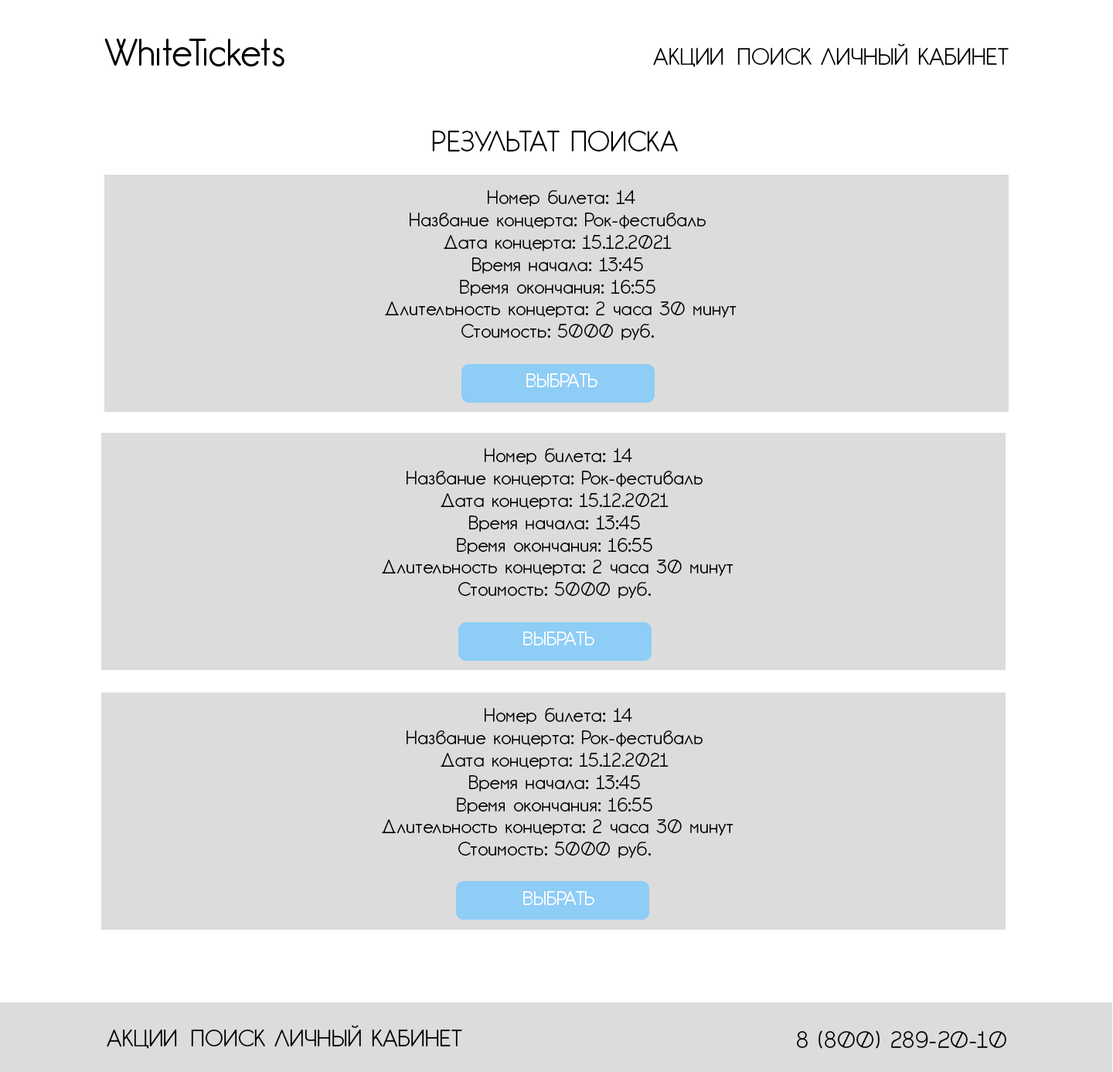
<style>
.page{position:relative;width:1113px;height:1072px;background:#dcdcdc}
.page>*{position:absolute;margin:0}
.t1{font:23.2px "GardensC";color:#000000}
.t2{font:27.8px "GardensC";color:#000000}
.t3{font:18.5px "GardensC";color:#000000}
.t4{font:18.5px "GardensC";color:#ffffff}
</style>
<div class="page">
<p class="t1" style="left:653px;top:43px;width:355px;height:24px">АКЦИИ ПОИСК ЛИЧНЫЙ КАБИНЕТ</p>
<p class="t2" style="left:432px;top:131px;width:246px;height:20px">РЕЗУЛЬТАТ ПОИСКА</p>
<p class="t3" style="left:385px;top:189px;width:351px;height:151px;text-align:center">Номер билета: 14<br>Название концерта: Рок-фестиваль <br>Дата концерта: 15.12.2021 <br>Время начала: 13:45 <br>Время окончания: 16:55 <br>Длительность концерта: 2 часа 30 минут<br>Стоимость: 5000 руб.</p>
<p class="t4" style="left:526px;top:373px;width:71px;height:15px">ВЫБРАТЬ</p>
<p class="t3" style="left:382px;top:447px;width:351px;height:151px;text-align:center">Номер билета: 14<br>Название концерта: Рок-фестиваль <br>Дата концерта: 15.12.2021 <br>Время начала: 13:45 <br>Время окончания: 16:55 <br>Длительность концерта: 2 часа 30 минут<br>Стоимость: 5000 руб.</p>
<p class="t4" style="left:523px;top:631px;width:71px;height:15px">ВЫБРАТЬ</p>
<p class="t3" style="left:382px;top:707px;width:351px;height:151px;text-align:center">Номер билета: 14<br>Название концерта: Рок-фестиваль <br>Дата концерта: 15.12.2021 <br>Время начала: 13:45 <br>Время окончания: 16:55 <br>Длительность концерта: 2 часа 30 минут<br>Стоимость: 5000 руб.</p>
<p class="t4" style="left:523px;top:891px;width:71px;height:15px">ВЫБРАТЬ</p>
<p class="t1" style="left:107px;top:1025px;width:355px;height:24px">АКЦИИ ПОИСК ЛИЧНЫЙ КАБИНЕТ</p>
<p class="t1" style="left:796px;top:1030px;width:210px;height:19px">8 (800) 289-20-10</p>
</div>
